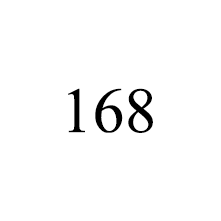
<style>
.page{position:relative;width:221px;height:221px;background:#ffffff}
.page>*{position:absolute;margin:0}
.t1{font:63.9px "TimesNewRomanPSMT";color:#000000}
</style>
<div class="page">
<p class="t1" style="left:68px;top:88px;width:85px;height:45px">168</p>
</div>
